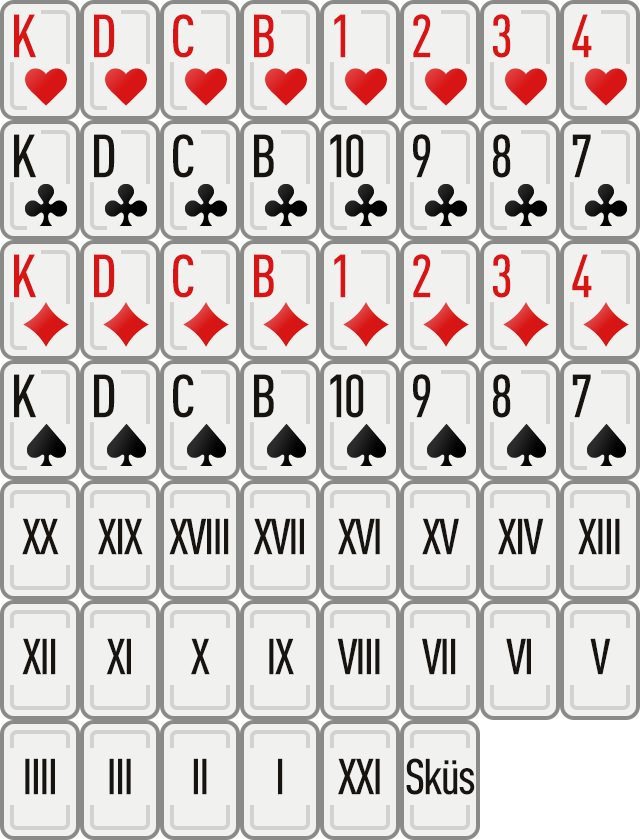
<style>
.page{position:relative;width:640px;height:840px;background:#f1f2f0}
.page>*{position:absolute;margin:0}
.t1{font:60px "DINCond-Medium";letter-spacing:-0.05em;color:#d81515}
.t2{font:60px "DINCond-Medium";letter-spacing:-0.05em;color:#171410}
.t3{font:60px "DINCond-Medium";letter-spacing:-0.1em;color:#171410}
.t4{font:50px "DINCond-Medium";letter-spacing:-0.05em;color:#171410}
</style>
<div class="page">
<p class="t1" style="left:14px;top:14px;width:22px;height:44px">K</p>
<p class="t1" style="left:94px;top:14px;width:21px;height:44px">D</p>
<p class="t1" style="left:173px;top:14px;width:21px;height:44px">C</p>
<p class="t1" style="left:254px;top:14px;width:20px;height:44px">B</p>
<p class="t1" style="left:334px;top:14px;width:12px;height:44px">1</p>
<p class="t1" style="left:413px;top:14px;width:18px;height:44px">2</p>
<p class="t1" style="left:493px;top:14px;width:18px;height:44px">3</p>
<p class="t1" style="left:572px;top:14px;width:20px;height:44px">4</p>
<p class="t2" style="left:14px;top:134px;width:22px;height:44px">K</p>
<p class="t2" style="left:94px;top:134px;width:21px;height:44px">D</p>
<p class="t2" style="left:173px;top:134px;width:21px;height:44px">C</p>
<p class="t2" style="left:254px;top:134px;width:20px;height:44px">B</p>
<p class="t3" style="left:330px;top:134px;width:34px;height:44px">10</p>
<p class="t2" style="left:413px;top:134px;width:18px;height:44px">9</p>
<p class="t2" style="left:493px;top:134px;width:18px;height:44px">8</p>
<p class="t2" style="left:572px;top:134px;width:19px;height:44px">7</p>
<p class="t1" style="left:14px;top:254px;width:22px;height:44px">K</p>
<p class="t1" style="left:94px;top:254px;width:21px;height:44px">D</p>
<p class="t1" style="left:173px;top:254px;width:21px;height:44px">C</p>
<p class="t1" style="left:254px;top:254px;width:20px;height:44px">B</p>
<p class="t1" style="left:334px;top:254px;width:12px;height:44px">1</p>
<p class="t1" style="left:413px;top:254px;width:18px;height:44px">2</p>
<p class="t1" style="left:493px;top:254px;width:18px;height:44px">3</p>
<p class="t1" style="left:572px;top:254px;width:20px;height:44px">4</p>
<p class="t2" style="left:14px;top:374px;width:22px;height:44px">K</p>
<p class="t2" style="left:94px;top:374px;width:21px;height:44px">D</p>
<p class="t2" style="left:173px;top:374px;width:21px;height:44px">C</p>
<p class="t2" style="left:254px;top:374px;width:20px;height:44px">B</p>
<p class="t3" style="left:330px;top:374px;width:34px;height:44px">10</p>
<p class="t2" style="left:413px;top:374px;width:18px;height:44px">9</p>
<p class="t2" style="left:493px;top:374px;width:18px;height:44px">8</p>
<p class="t2" style="left:572px;top:374px;width:19px;height:44px">7</p>
<p class="t4" style="left:22px;top:518px;width:37px;height:37px">XX</p>
<p class="t4" style="left:98px;top:518px;width:45px;height:37px">XIX</p>
<p class="t4" style="left:169px;top:518px;width:60px;height:37px">XVIII</p>
<p class="t4" style="left:253px;top:518px;width:51px;height:37px">XVII</p>
<p class="t4" style="left:338px;top:518px;width:42px;height:37px">XVI</p>
<p class="t4" style="left:422px;top:518px;width:37px;height:37px">XV</p>
<p class="t4" style="left:498px;top:518px;width:46px;height:37px">XIV</p>
<p class="t4" style="left:578px;top:518px;width:42px;height:37px">XIII</p>
<p class="t4" style="left:22px;top:638px;width:34px;height:37px">XII</p>
<p class="t4" style="left:106px;top:638px;width:25px;height:37px">XI</p>
<p class="t4" style="left:191px;top:638px;width:19px;height:37px">X</p>
<p class="t4" style="left:269px;top:638px;width:25px;height:37px">IX</p>
<p class="t4" style="left:337px;top:638px;width:43px;height:37px">VIII</p>
<p class="t4" style="left:422px;top:638px;width:34px;height:37px">VII</p>
<p class="t4" style="left:506px;top:638px;width:25px;height:37px">VI</p>
<p class="t4" style="left:590px;top:638px;width:21px;height:37px">V</p>
<p class="t4" style="left:25px;top:758px;width:30px;height:37px">IIII</p>
<p class="t4" style="left:109px;top:758px;width:22px;height:37px">III</p>
<p class="t4" style="left:193px;top:758px;width:14px;height:37px">II</p>
<p class="t4" style="left:278px;top:758px;width:5px;height:37px">I</p>
<p class="t4" style="left:338px;top:758px;width:42px;height:37px">XXI</p>
<p class="t4" style="left:406px;top:758px;width:69px;height:37px">Sküs</p>
</div>
